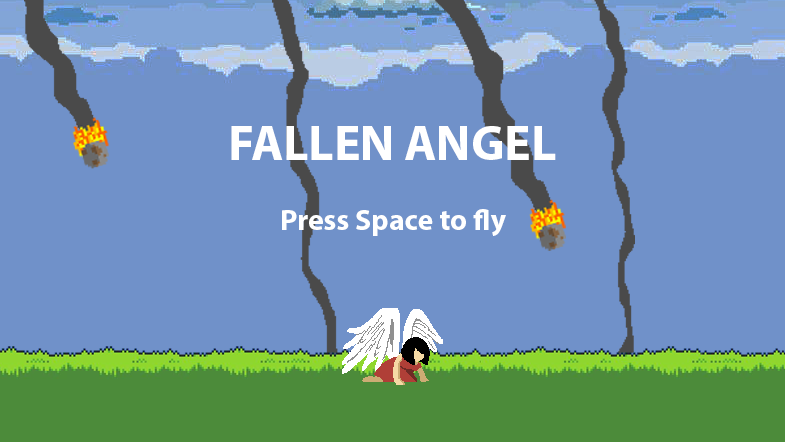
<style>
.page{position:relative;width:785px;height:442px;background:#7091c9}
.page>*{position:absolute;margin:0}
.t1{font:49.4px "MyriadPro-Bold";color:#ffffff}
.t2{font:29.6px "MyriadPro-Bold";color:#ffffff}
</style>
<div class="page">
<p class="t1" style="left:231px;top:126px;width:325px;height:34px">FALLEN ANGEL</p>
<p class="t2" style="left:282px;top:209px;width:224px;height:27px">Press Space to fly</p>
</div>
